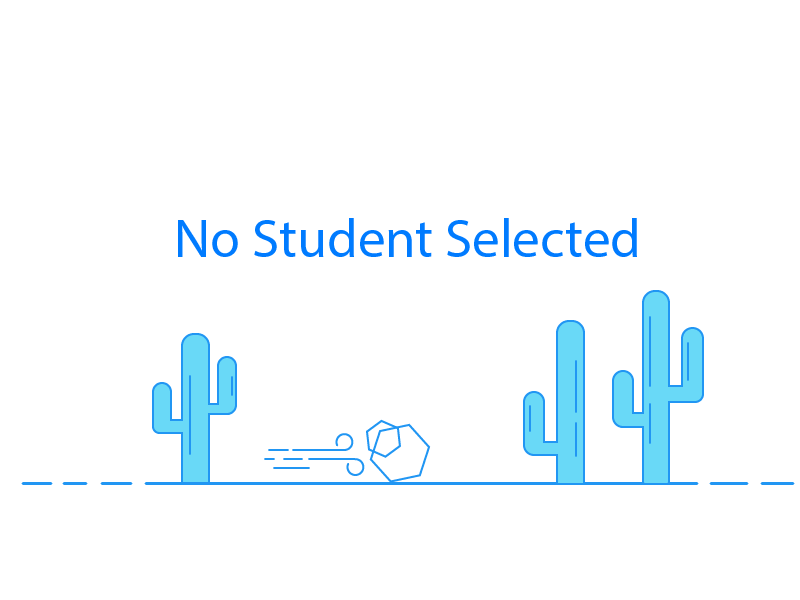
<style>
.page{position:relative;width:800px;height:600px;background:#ffffff}
.page>*{position:absolute;margin:0}
.t1{font:54.7px "MyriadPro-Regular";color:#007bff}
</style>
<div class="page">
<p class="t1" style="left:178px;top:218px;width:459px;height:39px">No Student Selected</p>
</div>
